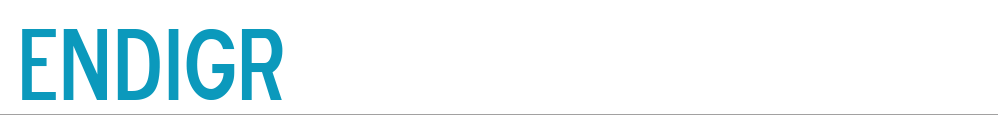
<style>
.page{position:relative;width:1000px;height:136px;background:#ffffff}
.page>*{position:absolute;margin:0}
.t1{font:100.8px "BlueHighwayDType";color:#0b99bc}
</style>
<div class="page">
<p class="t1" style="left:22px;top:29px;width:261px;height:71px">endigr</p>
</div>
